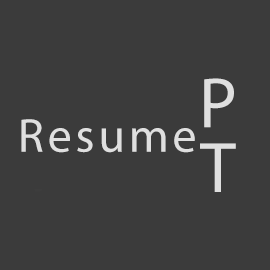
<style>
.page{position:relative;width:270px;height:270px;background:#3b3b3b}
.page>*{position:absolute;margin:0}
.t1{font:72px "MyriadPro-Regular";letter-spacing:-0.1em;color:#dfdfdf}
.t2{font:48px "MyriadPro-Regular";letter-spacing:0.08em;color:#dfdfdf}
</style>
<div class="page">
<p class="t1" style="left:200px;top:78px;width:36px;height:114px">PT</p>
<p class="t2" style="left:21px;top:119px;width:174px;height:34px">Resume</p>
</div>
